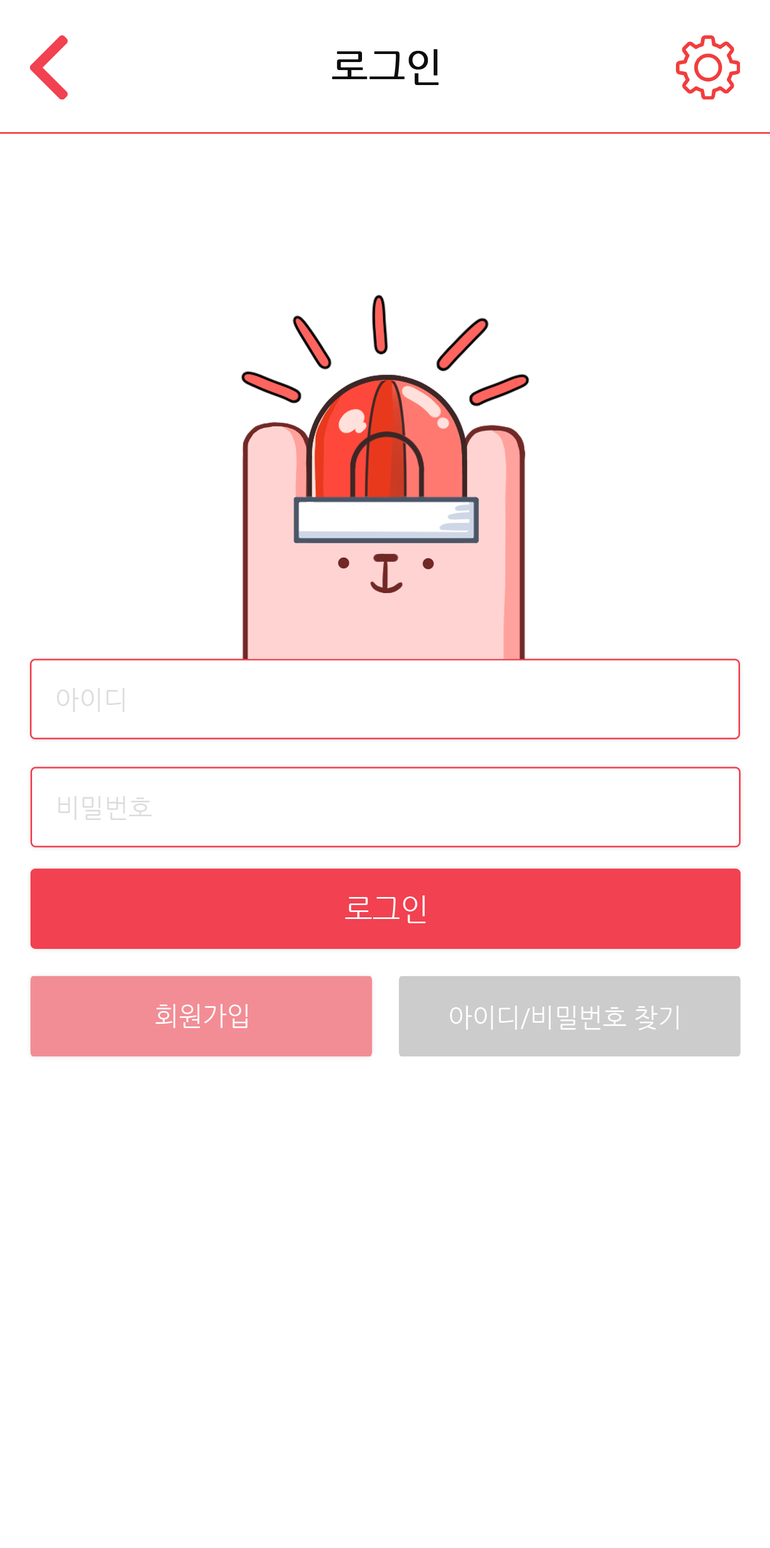
<style>
.page{position:relative;width:770px;height:1548px;background:#ffffff}
.page>*{position:absolute;margin:0}
.t1{font:38.5px "NanumGothic";color:#0d0d0d;font-weight:bold}
.t2{font:25.7px "NanumGothic";color:#dddddd}
.t3{font:30px "NanumGothic";color:#ffffff}
.t4{font:25.7px "NanumGothic";color:#ffffff}
</style>
<div class="page">
<p class="t1" style="left:332px;top:49px;width:107px;height:36px">로그인</p>
<p class="t2" style="left:57px;top:688px;width:68px;height:24px">아이디</p>
<p class="t2" style="left:58px;top:796px;width:94px;height:24px">비밀번호</p>
<p class="t3" style="left:345px;top:895px;width:81px;height:28px">로그인</p>
<p class="t4" style="left:156px;top:1004px;width:92px;height:24px">회원가입</p>
<p class="t4" style="left:450px;top:1006px;width:229px;height:24px">아이디/비밀번호 찾기</p>
</div>
